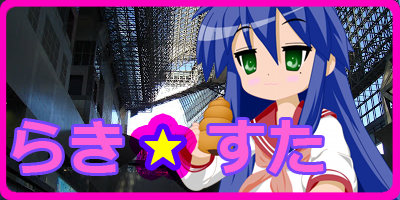
<style>
.page{position:relative;width:400px;height:200px}
.page>*{position:absolute;margin:0}
.t1{font:60px "Meiryo-Bold";color:#ff5fd7}
.t2{font:48px "Meiryo-Bold";color:#fffc00}
</style>
<div class="page">
<p class="t1" style="left:12px;top:121px;width:111px;height:52px">らき</p>
<p class="t1" style="left:209px;top:120px;width:115px;height:54px">すた</p>
<p class="t2" style="left:144px;top:129px;width:38px;height:36px">★</p>
</div>
